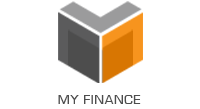
<style>
.page{position:relative;width:200px;height:109px;background:#ffffff}
.page>*{position:absolute;margin:0}
.t1{font:14px "EurostileRegular";letter-spacing:0.05em;color:#4d4d4d}
</style>
<div class="page">
<p class="t1" style="left:58px;top:95px;width:83px;height:9px">MY FINANCE</p>
</div>
